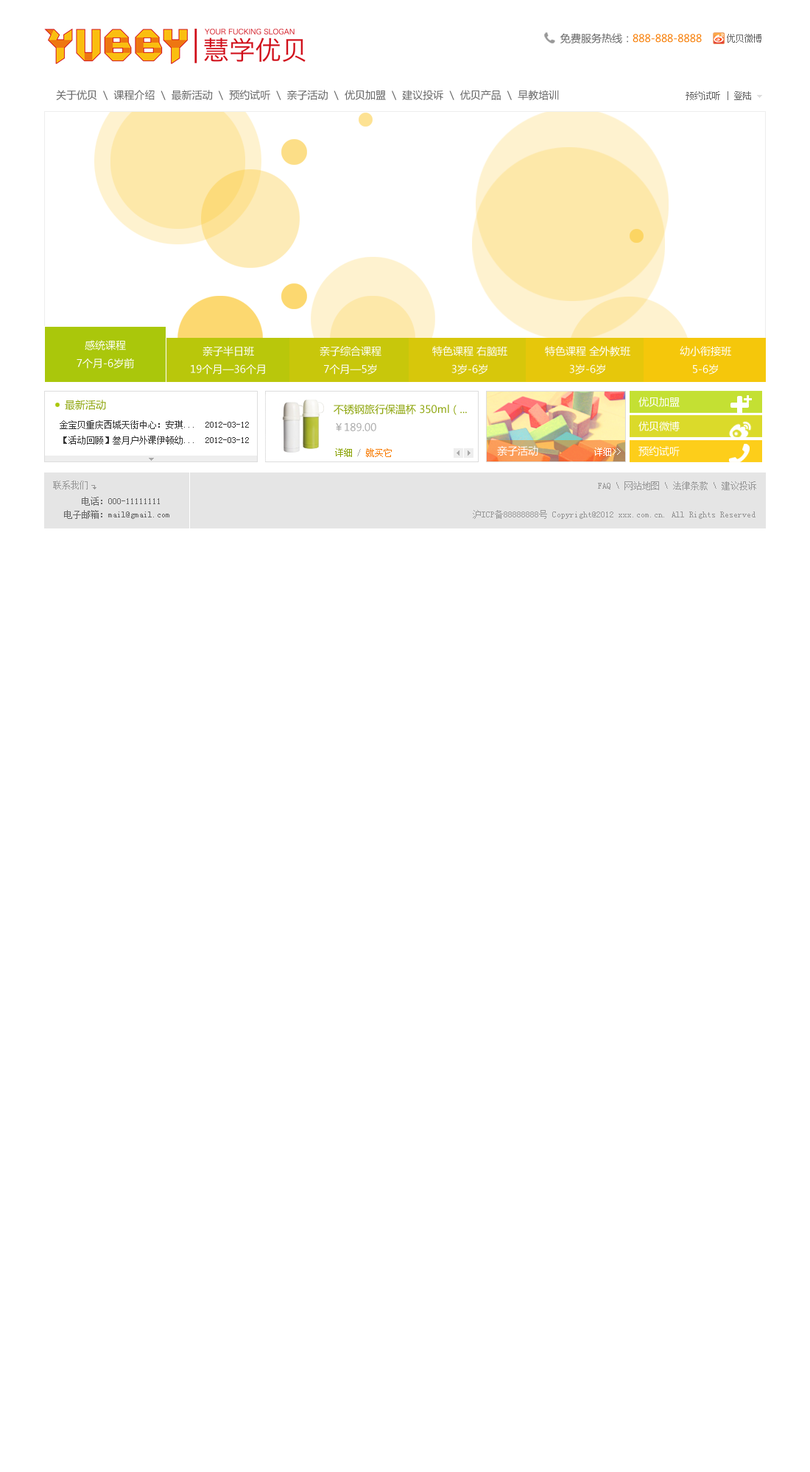
<style>
.page{position:relative;width:810px;height:1472px;background:#ffffff}
.page>*{position:absolute;margin:0}
.t1{font:10.3px "MicrosoftYaHei";color:#f77b00}
.t2{font:10.3px "MicrosoftYaHei";color:#666666}
.t3{font:8.8px "SimSun";color:#666666}
.t4{font:10.3px "MicrosoftYaHei";color:#ffffff}
.t5{font:10.3px "MicrosoftYaHei";color:#8ca409}
.t6{font:10.3px "MicrosoftYaHei";color:#aaaaaa}
.t7{font:8.8px "SimSun";color:#333333}
.t8{font:8.8px "SimSun";color:#f77b00}
.t9{font:8.8px "SimSun";color:#8ca409}
.t10{font:8.8px "SimSun";color:#aaaaaa}
.t11{font:8.8px "SimSun";color:#ffffff}
.t12{font:8.8px "SimSun";color:#999999}
</style>
<div class="page">
<p class="t1" style="left:560px;top:33px;width:142px;height:10px"><span class="t2">免费服务热线：</span>888-888-8888</p>
<p class="t3" style="left:727px;top:34px;width:34px;height:9px">优贝微博</p>
<p class="t2" style="left:56px;top:90px;width:503px;height:10px">关于优贝  \  课程介绍  \  最新活动  \  预约试听  \  亲子活动  \  优贝加盟  \  建议投诉  \  优贝产品  \  早教培训</p>
<p class="t3" style="left:685px;top:91px;width:66px;height:9px">预约试听 | 登陆</p>
<p class="t4" style="left:77px;top:340px;width:57px;height:29px;text-align:center">感统课程<br>7个月-6岁前</p>
<p class="t4" style="left:191px;top:346px;width:74px;height:29px;text-align:center">亲子半日班<br>19个月—36个月</p>
<p class="t4" style="left:320px;top:346px;width:61px;height:29px;text-align:center">亲子综合课程<br>7个月—5岁</p>
<p class="t4" style="left:432px;top:346px;width:75px;height:29px;text-align:center">特色课程 右脑班<br>3岁-6岁</p>
<p class="t4" style="left:545px;top:346px;width:85px;height:29px;text-align:center">特色课程 全外教班<br>3岁-6岁</p>
<p class="t4" style="left:680px;top:346px;width:51px;height:29px;text-align:center">幼小衔接班<br>5-6岁</p>
<p class="t5" style="left:65px;top:400px;width:41px;height:10px">最新活动</p>
<p class="t4" style="left:638px;top:397px;width:42px;height:10px">优贝加盟</p>
<p class="t5" style="left:334px;top:404px;width:133px;height:27px">不锈钢旅行保温杯 350ml（...<br><span class="t6">￥189.00</span></p>
<p class="t7" style="left:60px;top:420px;width:189px;height:25px">金宝贝重庆西城天街中心：安琪...  2012-03-12<br>【活动回顾】叁月户外课伊顿幼...  2012-03-12</p>
<p class="t4" style="left:638px;top:421px;width:42px;height:10px">优贝微博</p>
<p class="t8" style="left:335px;top:448px;width:57px;height:9px"><span class="t9">详细 </span><span class="t10">/ </span>就买它</p>
<p class="t4" style="left:497px;top:445px;width:41px;height:11px">亲子活动</p>
<p class="t11" style="left:594px;top:448px;width:27px;height:8px">详细&gt;&gt;</p>
<p class="t4" style="left:638px;top:446px;width:42px;height:10px">预约试听</p>
<p class="t12" style="left:53px;top:481px;width:35px;height:9px">联系我们</p>
<p class="t12" style="left:598px;top:481px;width:158px;height:9px">FAQ \ 网站地图 \ 法律条款 \ 建议投诉</p>
<p class="t3" style="left:82px;top:497px;width:78px;height:9px">电话：000-11111111</p>
<p class="t3" style="left:64px;top:510px;width:105px;height:9px">电子邮箱：mail@gmail.com</p>
<p class="t12" style="left:473px;top:510px;width:282px;height:9px">沪ICP备88888888号 Copyright@2012 xxx.com.cn. All Rights Reserved</p>
</div>
